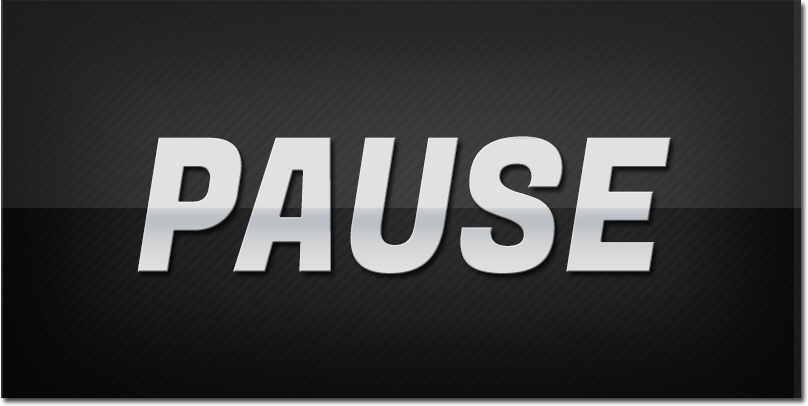
<style>
.page{position:relative;width:808px;height:406px}
.page>*{position:absolute;margin:0}
.t1{font:185.2px "FugazOne-Regular";color:#dfdfdf;scale:0.89 1}
</style>
<div class="page">
<p class="t1" style="left:137px;top:136px;width:534px;height:138px">PAUSE</p>
</div>
